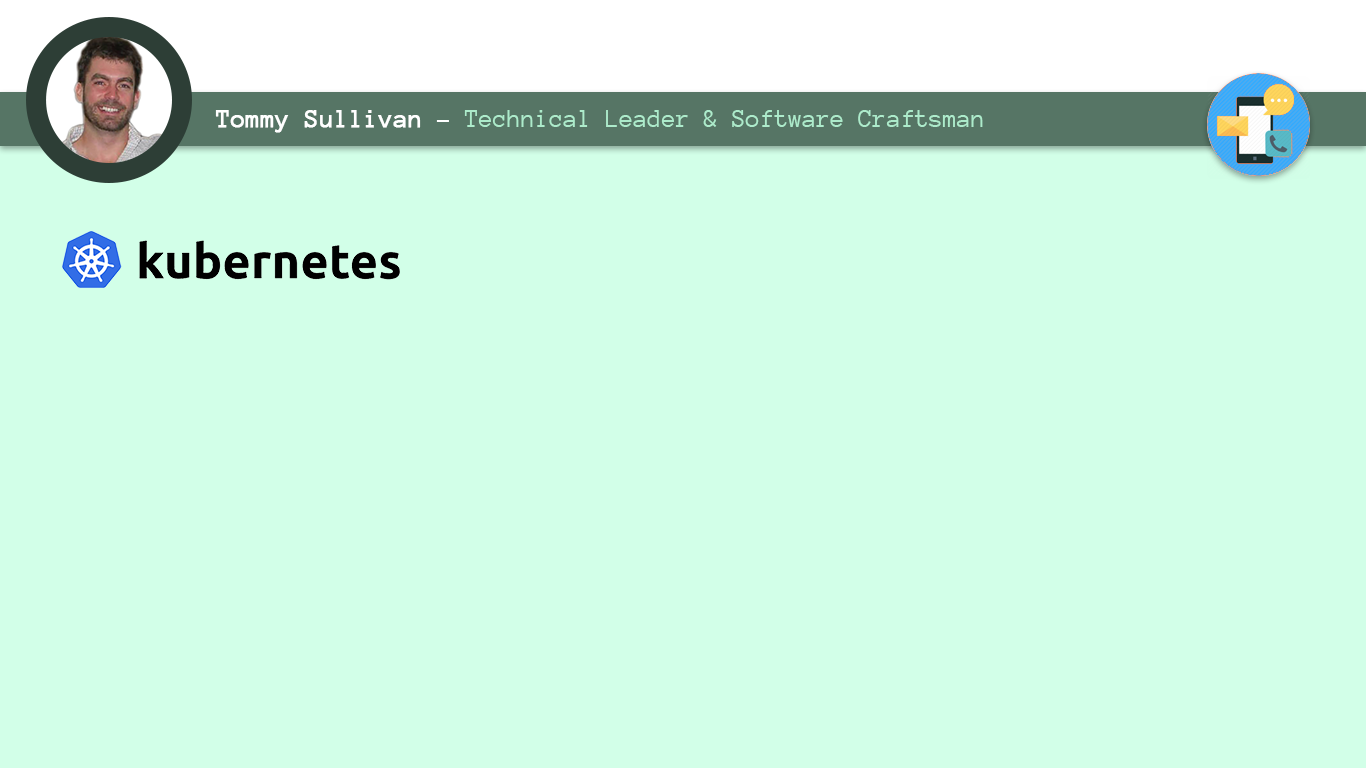
<style>
.page{position:relative;width:1366px;height:768px;background:#d2ffe8}
.page>*{position:absolute;margin:0}
.t1{font:25.8px "AnonymousPro";color:#adebcb}
.t2{font:25.8px "AnonymousPro";color:#ffffff;font-weight:bold}
.t3{font:25.8px "AnonymousPro";color:#ffffff}
</style>
<div class="page">
<p class="t1" style="left:215px;top:110px;width:768px;height:23px"><span class="t2">Tommy Sullivan</span><span class="t3"> - </span>Technical Leader &amp; Software Craftsman</p>
</div>
